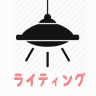
<style>
.page{position:relative;width:96px;height:96px;background:#fcfcfc}
.page>*{position:absolute;margin:0}
.t1{font:16.7px "mini-wakuwaku";letter-spacing:-0.06em;color:#f2898e;scale:0.78 1}
</style>
<div class="page">
<p class="t1" style="left:14px;top:72px;width:72px;height:15px">ライティング</p>
</div>
